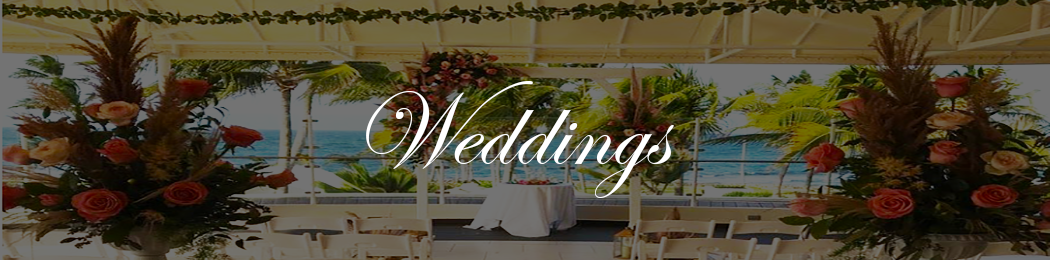
<style>
.page{position:relative;width:1050px;height:260px}
.page>*{position:absolute;margin:0}
.t1{font:107.5px "EdwardianScriptITC";color:#ffffff}
</style>
<div class="page">
<p class="t1" style="left:366px;top:81px;width:308px;height:117px">Weddings</p>
</div>
